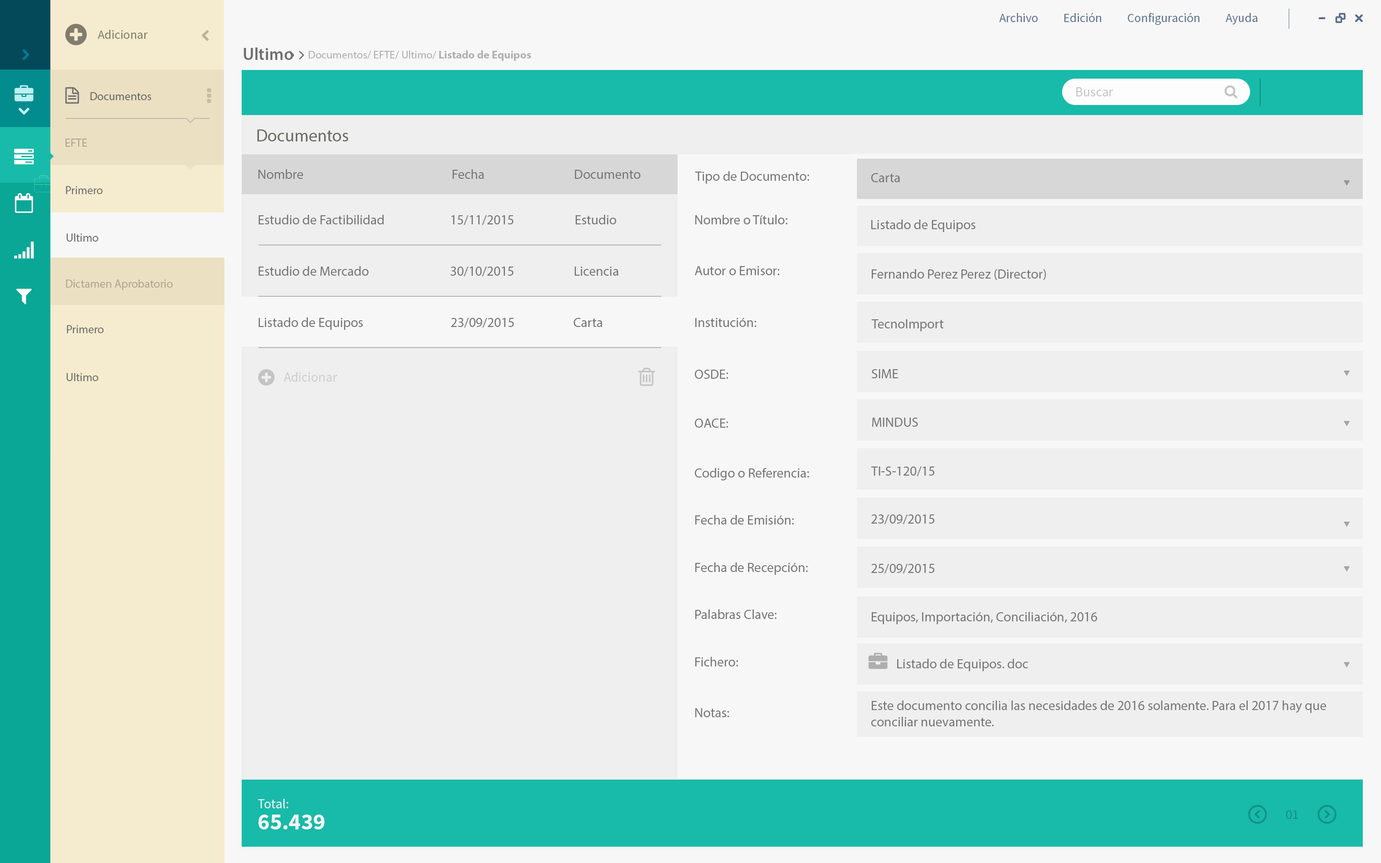
<style>
.page{position:relative;width:1381px;height:863px;background:#efefef}
.page>*{position:absolute;margin:0}
.t1{font:17.3px "MyriadPro-Semibold";color:#707070}
.t2{font:11px "MyriadPro-Regular";color:#afafaf}
.t3{font:11px "MyriadPro-Bold";color:#afafaf}
.t4{font:11.5px "MyriadPro-Regular";color:#6a6b66}
.t5{font:17.3px "MyriadPro-Regular";color:#6a6b66}
.t6{font:11.5px "MyriadPro-Regular";color:#b2a791}
.t7{font:13.4px "MyriadPro-Regular";color:#757575}
.t8{font:11.5px "MyriadPro-Regular";color:#707070}
.t9{font:13.4px "MyriadPro-Regular";color:#747474}
</style>
<div class="page">
<p class="t1" style="left:244px;top:47px;width:49px;height:13px">Ultimo</p>
<p class="t2" style="left:309px;top:50px;width:222px;height:11px">Documentos/ EFTE/ Ultimo/<span class="t3"> Listado de Equipos</span></p>
<p class="t4" style="left:90px;top:92px;width:62px;height:8px">Documentos</p>
<p class="t5" style="left:257px;top:129px;width:91px;height:12px">Documentos</p>
<p class="t6" style="left:65px;top:139px;width:22px;height:8px">EFTE</p>
<p class="t7" style="left:259px;top:169px;width:44px;height:10px">Nombre</p>
<p class="t7" style="left:453px;top:169px;width:31px;height:10px">Fecha</p>
<p class="t7" style="left:575px;top:170px;width:66px;height:9px">Documento</p>
<p class="t7" style="left:695px;top:171px;width:115px;height:13px">Tipo de Documento:</p>
<p class="t7" style="left:871px;top:173px;width:29px;height:9px">Carta</p>
<p class="t8" style="left:66px;top:186px;width:37px;height:8px">Primero</p>
<p class="t9" style="left:259px;top:215px;width:125px;height:9px">Estudio de Factibilidad</p>
<p class="t9" style="left:451px;top:215px;width:63px;height:10px">15/11/2015</p>
<p class="t9" style="left:576px;top:215px;width:40px;height:9px">Estudio</p>
<p class="t7" style="left:695px;top:215px;width:93px;height:9px">Nombre o Título:</p>
<p class="t7" style="left:871px;top:220px;width:105px;height:12px">Listado de Equipos</p>
<p class="t8" style="left:67px;top:234px;width:31px;height:8px">Ultimo</p>
<p class="t9" style="left:259px;top:266px;width:110px;height:10px">Estudio de Mercado</p>
<p class="t9" style="left:450px;top:267px;width:64px;height:10px">30/10/2015</p>
<p class="t9" style="left:575px;top:267px;width:44px;height:9px">Licencia</p>
<p class="t7" style="left:695px;top:266px;width:85px;height:9px">Autor o Emisor:</p>
<p class="t7" style="left:872px;top:269px;width:174px;height:11px">Fernando Perez Perez (Director)</p>
<p class="t6" style="left:66px;top:280px;width:107px;height:10px">Dictamen Aprobatorio</p>
<p class="t9" style="left:259px;top:317px;width:104px;height:13px">Listado de Equipos</p>
<p class="t9" style="left:451px;top:318px;width:63px;height:10px">23/09/2015</p>
<p class="t9" style="left:574px;top:318px;width:28px;height:9px">Carta</p>
<p class="t7" style="left:695px;top:318px;width:61px;height:9px">Institución:</p>
<p class="t8" style="left:67px;top:325px;width:37px;height:8px">Primero</p>
<p class="t7" style="left:871px;top:319px;width:73px;height:12px">TecnoImport</p>
<p class="t8" style="left:67px;top:373px;width:31px;height:8px">Ultimo</p>
<p class="t7" style="left:695px;top:370px;width:34px;height:9px">OSDE:</p>
<p class="t7" style="left:872px;top:369px;width:26px;height:9px">SIME</p>
<p class="t7" style="left:695px;top:419px;width:34px;height:9px">OACE:</p>
<p class="t7" style="left:872px;top:418px;width:46px;height:9px">MINDUS</p>
<p class="t7" style="left:695px;top:468px;width:114px;height:13px">Codigo o Referencia:</p>
<p class="t7" style="left:871px;top:467px;width:64px;height:10px">TI-S-120/15</p>
<p class="t7" style="left:695px;top:515px;width:99px;height:10px">Fecha de Emisión:</p>
<p class="t7" style="left:871px;top:515px;width:64px;height:10px">23/09/2015</p>
<p class="t7" style="left:695px;top:563px;width:113px;height:12px">Fecha de Recepción:</p>
<p class="t7" style="left:871px;top:564px;width:64px;height:10px">25/09/2015</p>
<p class="t7" style="left:695px;top:610px;width:82px;height:9px">Palabras Clave:</p>
<p class="t7" style="left:872px;top:612px;width:225px;height:12px">Equipos, Importación, Conciliación, 2016</p>
<p class="t7" style="left:695px;top:657px;width:43px;height:10px">Fichero:</p>
<p class="t7" style="left:897px;top:659px;width:131px;height:12px">Listado de Equipos. doc</p>
<p class="t7" style="left:872px;top:701px;width:455px;height:12px">Este documento concilia las necesidades de 2016 solamente. Para el 2017 hay que</p>
<p class="t7" style="left:695px;top:708px;width:34px;height:9px">Notas:</p>
<p class="t7" style="left:871px;top:717px;width:123px;height:10px">conciliar nuevamente.</p>
</div>
